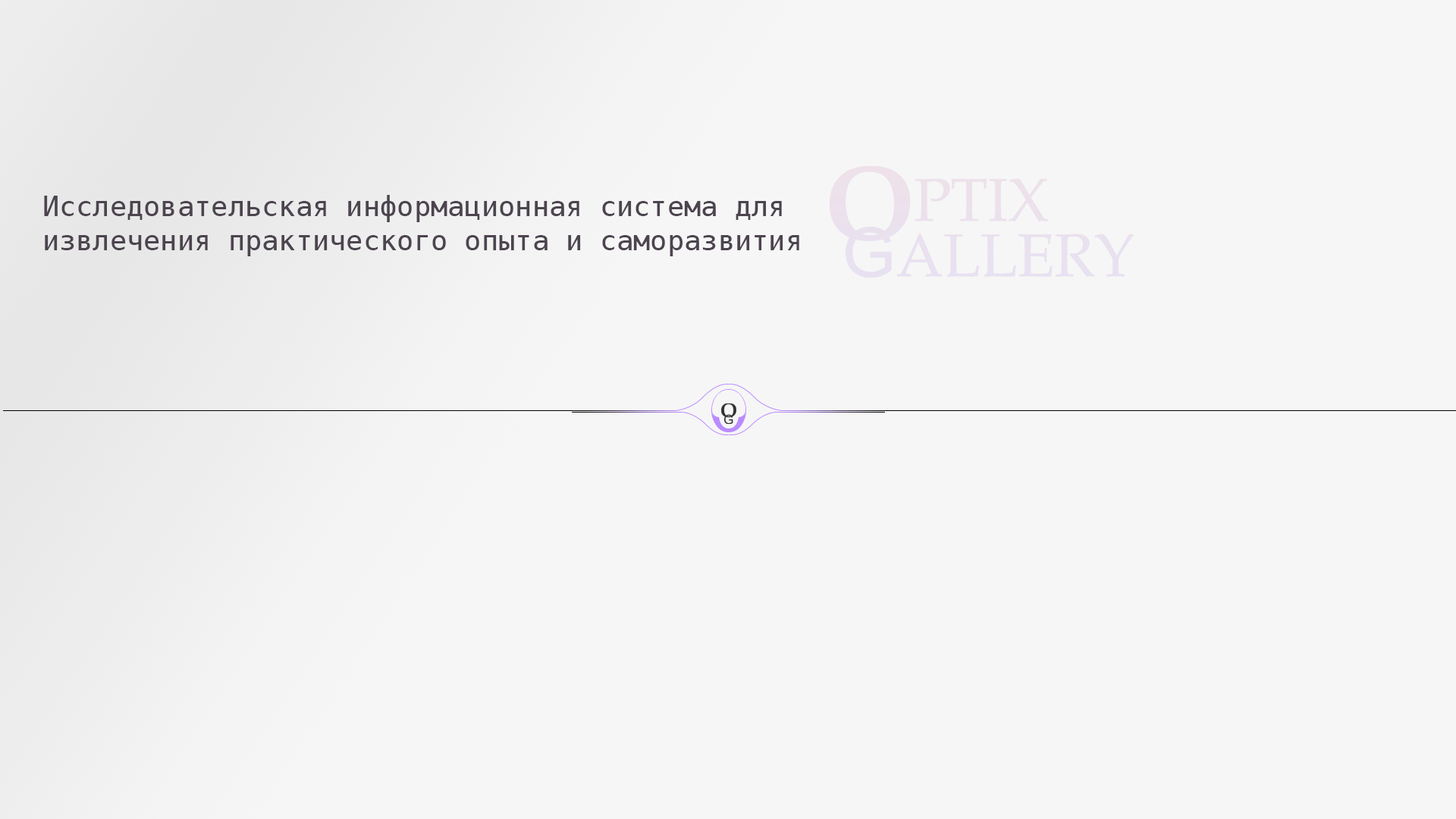
<style>
.page{position:relative;width:1456px;height:819px;background:#f6f6f6}
.page>*{position:absolute;margin:0}
.t1{font:28.1px "DejaVuSansMono";color:#4c444e}
</style>
<div class="page">
<p class="t1" style="left:44px;top:195px;width:755px;height:61px">Исследовательская информационная система для <br>извлечения практического опыта и саморазвития</p>
</div>
